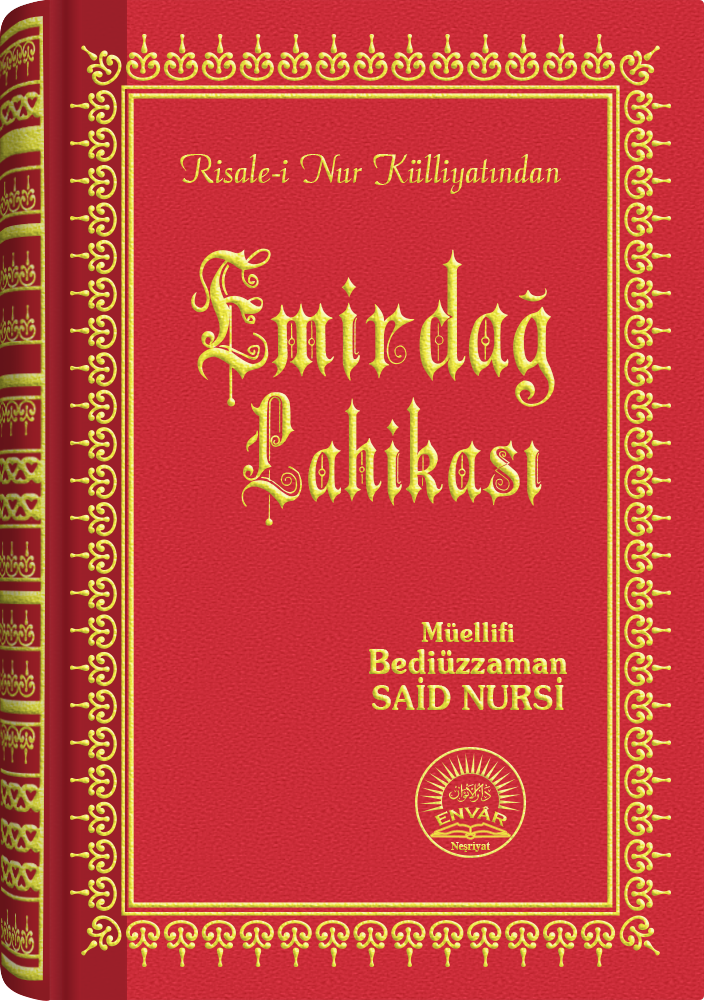
<style>
.page{position:relative;width:704px;height:1001px}
.page>*{position:absolute;margin:0}
.t1{font:45.3px "Barla © 072 Aria ScriptScriptSSi";scale:0.94 1}
.t2{font:165.1px "Barla © 001 Liva Nur";letter-spacing:-0.001em;scale:0.93 1}
.t3{font:138.3px "Barla © 001 Liva Nur";letter-spacing:-0.001em;scale:0.92 1}
.t4{font:33.4px/32.4px "SouvenirITCbyBT-Demi";scale:0.93 1}
.t5{font:27.4px/24.4px "SouvenirITCbyBT-Demi";scale:0.93 1}
.t6{font:33.4px/36.4px "SouvenirITCbyBT-Demi";scale:0.93 1}
.t7{font:15.6px "CopperplateGothic-Bold"}
.t8{font:11.2px "Times-Bold";scale:0.96 1}
</style>
<div class="page">
<p class="t1" style="left:180px;top:154px;width:381px;height:40px">Risale-i Nur Külliyatından</p>
<p class="t2" style="left:191px;top:248px;width:364px;height:159px">Emirdağ</p>
<p class="t3" style="left:241px;top:392px;width:301px;height:134px">Lahikası</p>
<p class="t4" style="left:369px;top:622px;width:198px;height:88px;text-align:center"><span class="t5">Müellifi<br></span>Bediüzzaman<br><span class="t6">SAİD NURSİ</span></p>
<p class="t7" style="left:434px;top:806px;width:73px;height:21px">ENVÂR</p>
<p class="t8" style="left:451px;top:842px;width:39px;height:10px">Neşriyat</p>
</div>
